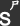
<style>
.page{position:relative;width:20px;height:26px;background:#333333}
.page>*{position:absolute;margin:0}
.t1{font:12px "DFKaiShu-SB-Estd-BF";color:#ffffff;font-weight:bold}
.t2{font:18px "ArialMT";color:#ffffff;font-weight:bold}
</style>
<div class="page">
<p class="t1" style="left:10px;top:0px;width:9px;height:11px">尸</p>
<p class="t2" style="left:0px;top:11px;width:11px;height:15px">S</p>
</div>
